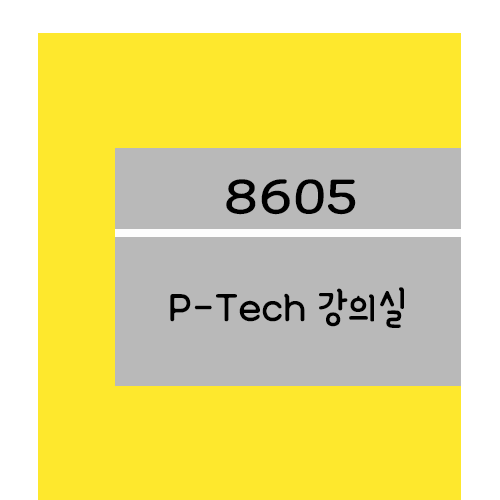
<style>
.page{position:relative;width:500px;height:500px;background:#fee82d}
.page>*{position:absolute;margin:0}
.t1{font:61.2px "YanoljaYacheR";color:#000000;scale:1.18 1}
.t2{font:48px "YanoljaYacheR";color:#000000}
</style>
<div class="page">
<p class="t1" style="left:226px;top:179px;width:130px;height:36px">8605</p>
<p class="t2" style="left:170px;top:287px;width:234px;height:41px">P-Tech 강의실</p>
</div>
